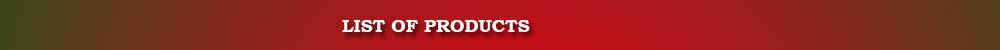
<style>
.page{position:relative;width:1000px;height:50px}
.page>*{position:absolute;margin:0}
.t1{font:18px "BookmanOldStyle-Bold";color:#fdfafa}
</style>
<div class="page">
<p class="t1" style="left:342px;top:20px;width:188px;height:12px">LIST OF PRODUCTS</p>
</div>
